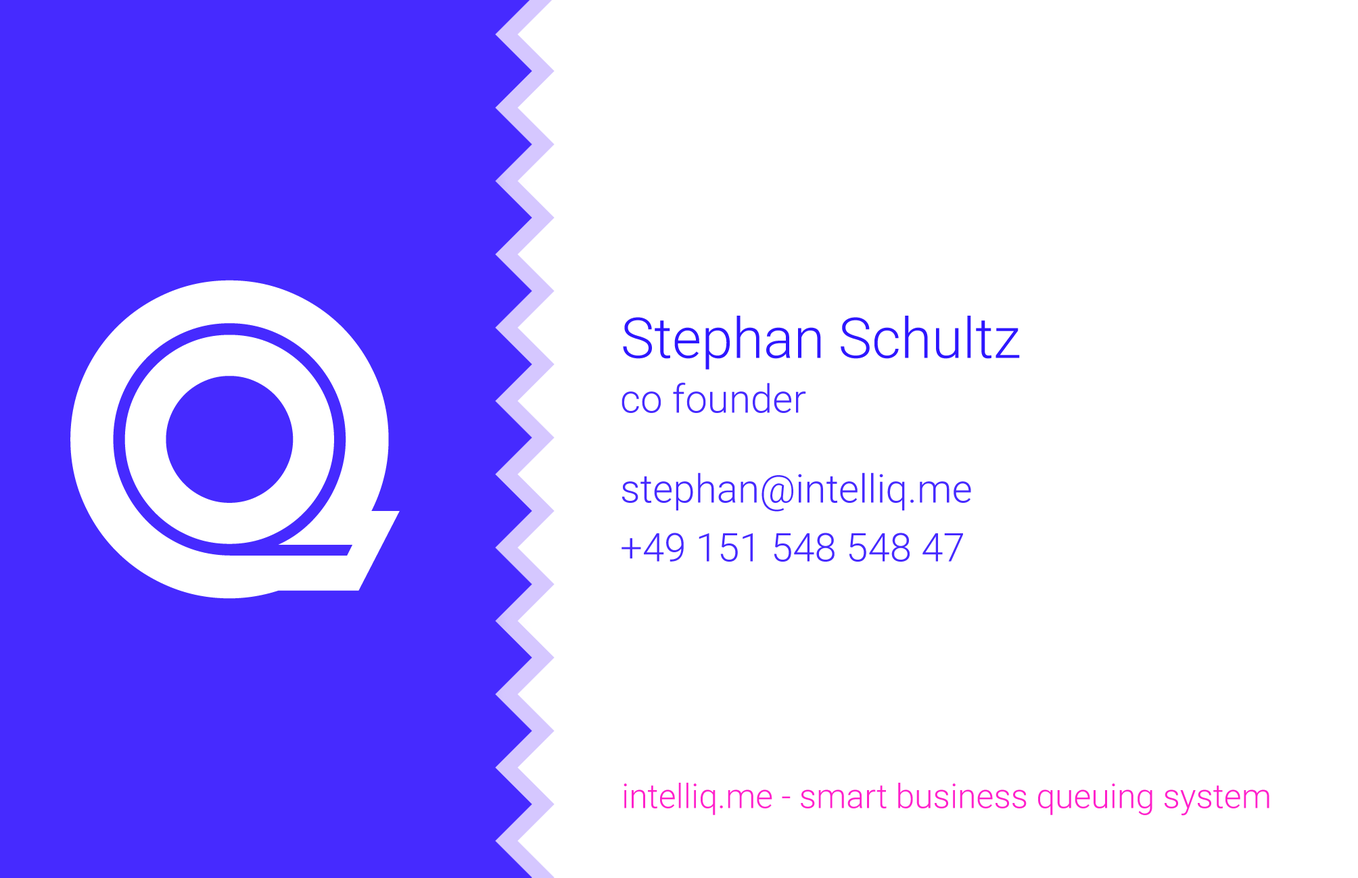
<style>
.page{position:relative;width:1358px;height:878px;background:#ffffff}
.page>*{position:absolute;margin:0}
.t1{font:454.1px "Phosphate-Inline";color:#ffffff;text-transform:uppercase}
.t2{font:56.3px "Roboto-Light";color:#2e17ff}
.t3{font:39.4px "Roboto-Light";color:#462aff}
.t4{font:33.8px "Roboto-Light";color:#ff21cb}
</style>
<div class="page">
<p class="t1" style="left:70px;top:280px;width:330px;height:319px">Q</p>
<p class="t2" style="left:623px;top:316px;width:397px;height:54px">Stephan Schultz</p>
<p class="t3" style="left:621px;top:383px;width:185px;height:30px">co founder</p>
<p class="t3" style="left:621px;top:473px;width:350px;height:39px">stephan@intelliq.me</p>
<p class="t3" style="left:621px;top:533px;width:342px;height:29px">+49 151 548 548 47</p>
<p class="t4" style="left:623px;top:783px;width:646px;height:33px">intelliq.me - smart business queuing system</p>
</div>
